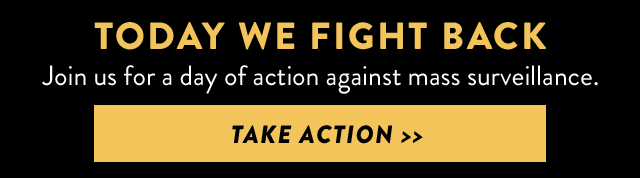
<style>
.page{position:relative;width:640px;height:178px;background:#000000}
.page>*{position:absolute;margin:0}
.t1{font:38px "BrandonGrotesque-Black";letter-spacing:0.07em;color:#f2c45a}
.t2{font:28px "BrandonGrotesque-Regular";color:#ffffff}
.t3{font:25px "BrandonGrotesque-BlackItalic";letter-spacing:0.06em;color:#000000}
</style>
<div class="page">
<p class="t1" style="left:94px;top:22px;width:452px;height:28px">TODAY WE FIGHT BACK</p>
<p class="t2" style="left:42px;top:65px;width:556px;height:29px">Join us for a day of action against mass surveillance.</p>
<p class="t3" style="left:232px;top:125px;width:191px;height:19px">TAKE ACTION &gt;&gt;</p>
</div>
